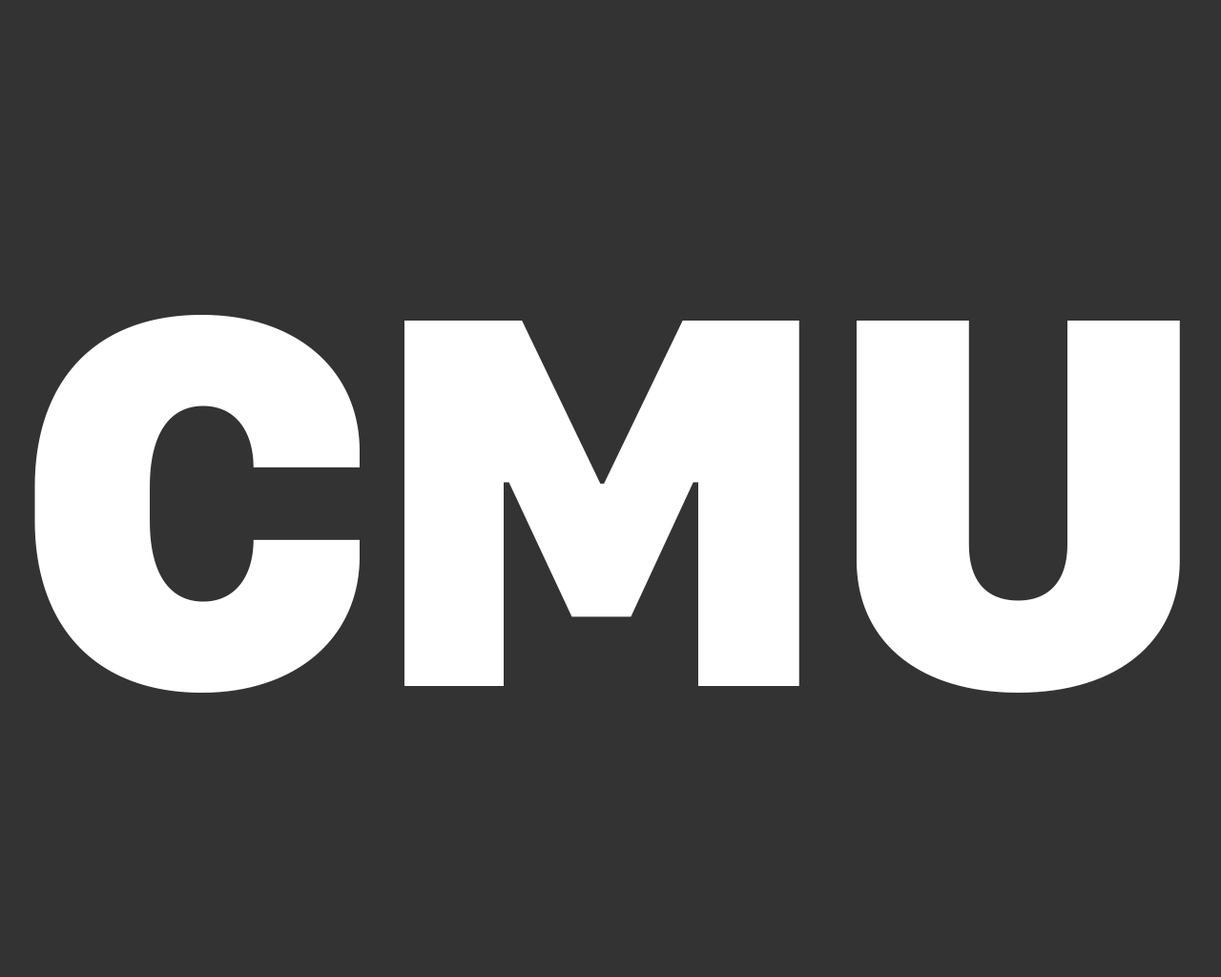
<style>
.page{position:relative;width:1221px;height:977px;background:#333333}
.page>*{position:absolute;margin:0}
.t1{font:548.3px "SanFranciscoDisplay-Black";color:#ffffff}
</style>
<div class="page">
<p class="t1" style="left:34px;top:315px;width:1146px;height:378px">CMU</p>
</div>
